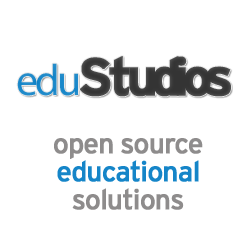
<style>
.page{position:relative;width:250px;height:250px;background:#ffffff}
.page>*{position:absolute;margin:0}
.t1{font:44.2px "MyriadHebrew-Regular";letter-spacing:-0.08em;color:#007ac3}
.t2{font:44.2px "MyriadHebrew-Regular";letter-spacing:-0.06em;color:#007ac3}
.t3{font:53px "Interstate-Bold";letter-spacing:-0.1em;color:#343434;font-weight:bold}
.t4{font:53px "Interstate-Bold";letter-spacing:-0.12em;color:#343434;font-weight:bold}
.t5{font:53px "Interstate-Bold";letter-spacing:-0.14em;color:#343434;font-weight:bold}
.t6{font:53px "Interstate-Bold";letter-spacing:-0.175em;color:#343434;font-weight:bold}
.t7{font:53px "Interstate-Bold";letter-spacing:-0.15em;color:#343434;font-weight:bold}
.t8{font:28px "Interstate-Regular";letter-spacing:-0.05em;color:#8e8c8c;font-weight:bold}
.t9{font:28px "Interstate-Regular";letter-spacing:-0.05em;color:#1585c8;font-weight:bold}
</style>
<div class="page">
<p class="t1" style="left:17px;top:56px;width:214px;height:41px"><span class="t2">e</span>du<span class="t3">S</span><span class="t4">t</span><span class="t5">u</span><span class="t6">d</span><span class="t5">i</span><span class="t7">o</span><span class="t3">s</span></p>
<p class="t8" style="left:54px;top:138px;width:149px;height:72px;text-align:center">open source<br><span class="t9">educational<br></span>solutions</p>
</div>
